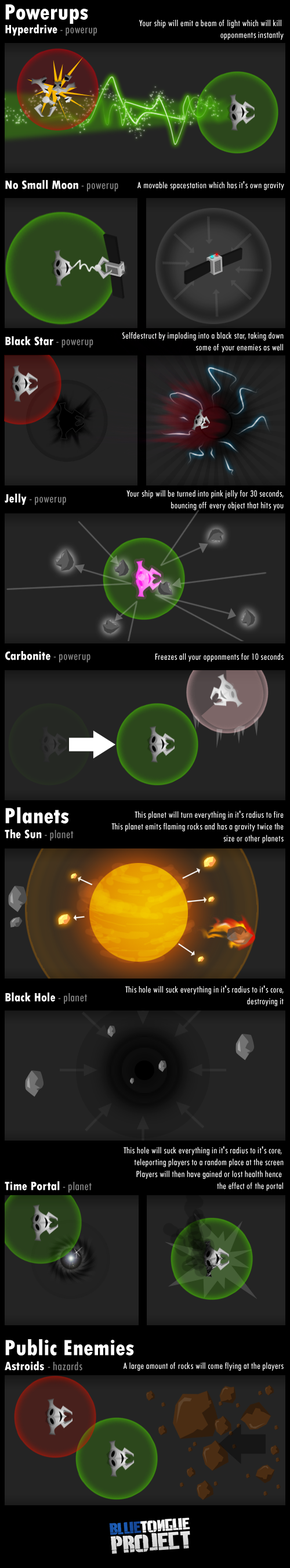
<style>
.page{position:relative;width:290px;height:1568px;background:#242424}
.page>*{position:absolute;margin:0}
.t1{font:23.2px "TwCenMT-CondensedExtraBold";color:#ffffff}
.t2{font:12.8px "TwCenMT-CondensedExtraBold";color:#ffffff}
.t3{font:12.8px "TwCenMT-Condensed";color:#868686}
.t4{font:9.9px "TwCenMT-Condensed";color:#ffffff}
</style>
<div class="page">
<p class="t1" style="left:5px;top:4px;width:83px;height:20px">Powerups</p>
<p class="t2" style="left:5px;top:24px;width:92px;height:12px">Hyperdrive <span class="t3">- powerup</span></p>
<p class="t4" style="left:139px;top:20px;width:145px;height:20px;text-align:right">Your ship will emit a beam of light which will kill <br>opponments instantly</p>
<p class="t2" style="left:5px;top:180px;width:113px;height:12px">No Small Moon <span class="t3">- powerup</span></p>
<p class="t4" style="left:138px;top:181px;width:147px;height:9px">A movable spacestation which has it's own gravity</p>
<p class="t2" style="left:5px;top:336px;width:88px;height:12px">Black Star <span class="t3">- powerup</span></p>
<p class="t4" style="left:123px;top:332px;width:161px;height:21px;text-align:right">Selfdestruct by imploding into a black star, taking down some of your enemies as well</p>
<p class="t3" style="left:5px;top:494px;width:61px;height:11px"><span class="t2">Jelly </span>- powerup</p>
<p class="t4" style="left:127px;top:490px;width:157px;height:20px;text-align:right">Your ship will be turned into pink jelly for 30 seconds, bouncing off every object that hits you</p>
<p class="t2" style="left:5px;top:651px;width:86px;height:12px">Carbonite <span class="t3">- powerup</span></p>
<p class="t4" style="left:155px;top:653px;width:129px;height:9px">Freezes all your opponments for 10 seconds</p>
<p class="t1" style="left:5px;top:807px;width:64px;height:16px">Planets</p>
<p class="t4" style="left:112px;top:811px;width:172px;height:32px;text-align:right">This planet will turn everything in it's radius to fire<br>This planet emits flaming rocks and has a gravity twice the size or other planets</p>
<p class="t3" style="left:5px;top:829px;width:69px;height:12px"><span class="t2">The Sun </span>- planet</p>
<p class="t4" style="left:125px;top:986px;width:159px;height:20px;text-align:right">This hole will suck everything in it's radius to it's core, destroying it</p>
<p class="t2" style="left:5px;top:992px;width:82px;height:12px">Black Hole <span class="t3">- planet</span></p>
<p class="t4" style="left:124px;top:1146px;width:160px;height:45px;text-align:right">This hole will suck everything in it's radius to it's core, <br>teleporting players to a random place at the screen<br>Players will then have gained or lost health hence <br>the effect of the portal</p>
<p class="t2" style="left:5px;top:1181px;width:87px;height:12px">Time Portal <span class="t3">- planet</span></p>
<p class="t1" style="left:5px;top:1339px;width:129px;height:16px">Public Enemies</p>
<p class="t3" style="left:5px;top:1361px;width:77px;height:10px"><span class="t2">Astroids </span>- hazards</p>
<p class="t4" style="left:123px;top:1362px;width:161px;height:9px">A large amount of rocks will come flying at the players</p>
</div>
